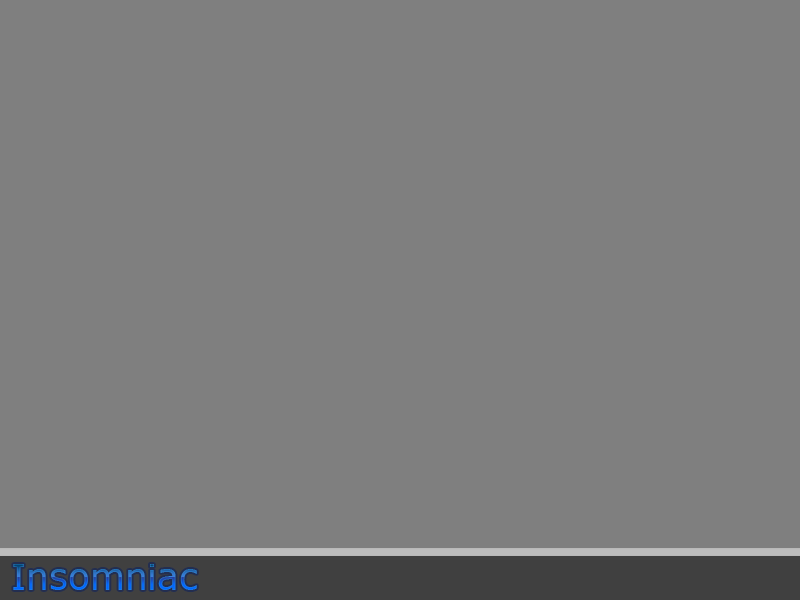
<style>
.page{position:relative;width:800px;height:600px;background:#7f7f7f}
.page>*{position:absolute;margin:0}
.t1{font:36px "Verdana"}
</style>
<div class="page">
<p class="t1" style="left:13px;top:564px;width:184px;height:26px">Insomniac</p>
</div>
